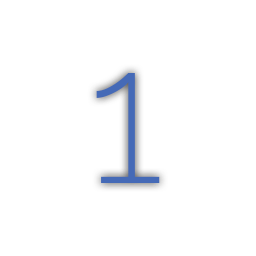
<style>
.page{position:relative;width:256px;height:256px;background:#ffffff}
.page>*{position:absolute;margin:0}
.t1{font:192px "Raleway-ExtraLight";color:#456ab7}
</style>
<div class="page">
<p class="t1" style="left:96px;top:73px;width:64px;height:110px">1</p>
</div>
